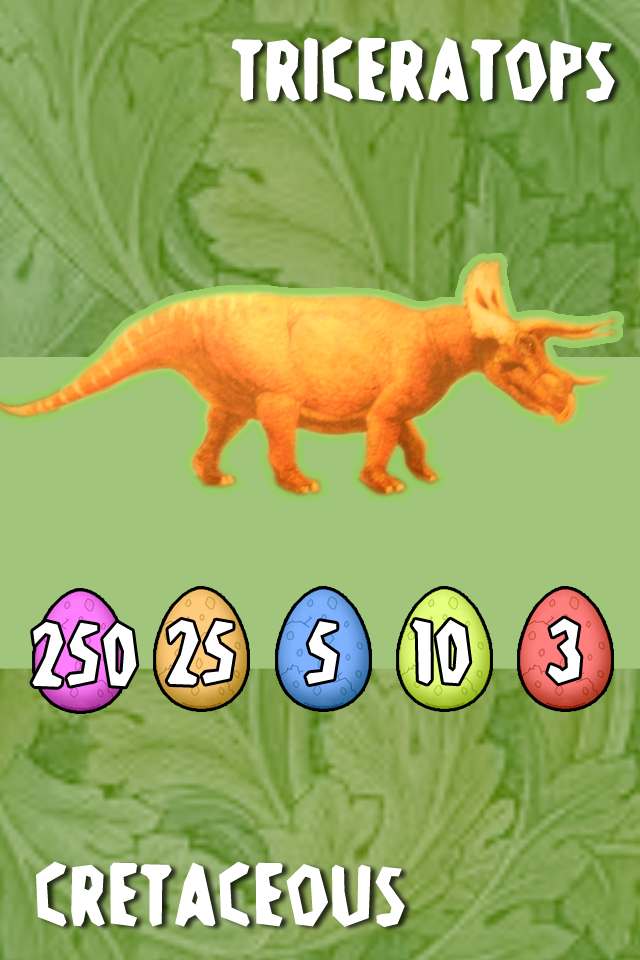
<style>
.page{position:relative;width:640px;height:960px;background:#a0c57b}
.page>*{position:absolute;margin:0}
.t1{font:96px "Stone-Age";color:#ffffff}
</style>
<div class="page">
<p class="t1" style="left:231px;top:36px;width:384px;height:67px">Triceratops</p>
<p class="t1" style="left:32px;top:622px;width:105px;height:65px">250</p>
<p class="t1" style="left:167px;top:620px;width:67px;height:65px">25</p>
<p class="t1" style="left:306px;top:621px;width:32px;height:64px">5</p>
<p class="t1" style="left:412px;top:619px;width:58px;height:65px">10</p>
<p class="t1" style="left:548px;top:618px;width:33px;height:66px">3</p>
<p class="t1" style="left:36px;top:861px;width:369px;height:67px">Cretaceous</p>
</div>
